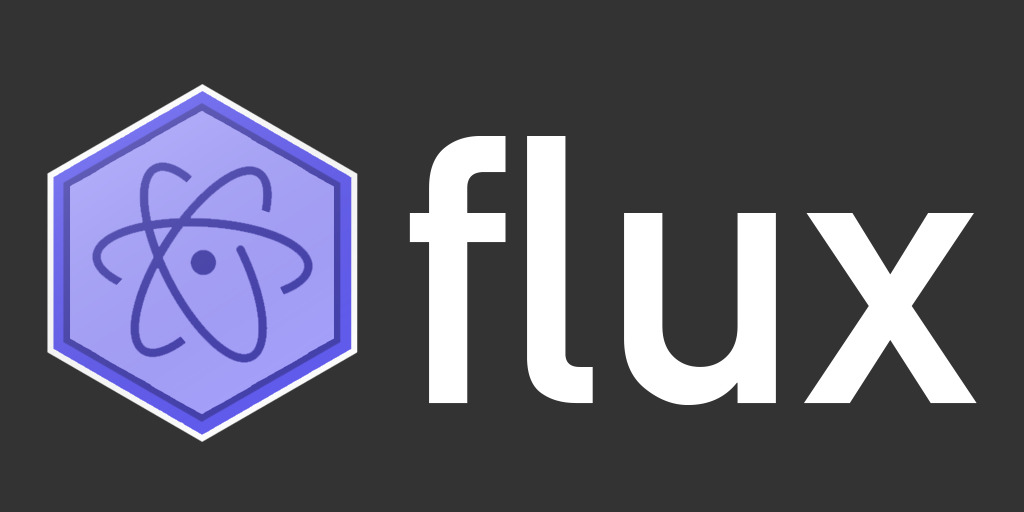
<style>
.page{position:relative;width:1024px;height:512px;background:#333333}
.page>*{position:absolute;margin:0}
.t1{font:374.7px "AlteDIN1451Mittelschrift";color:#eeedfe}
</style>
<div class="page">
<p class="t1" style="left:409px;top:136px;width:568px;height:269px">flux</p>
</div>
